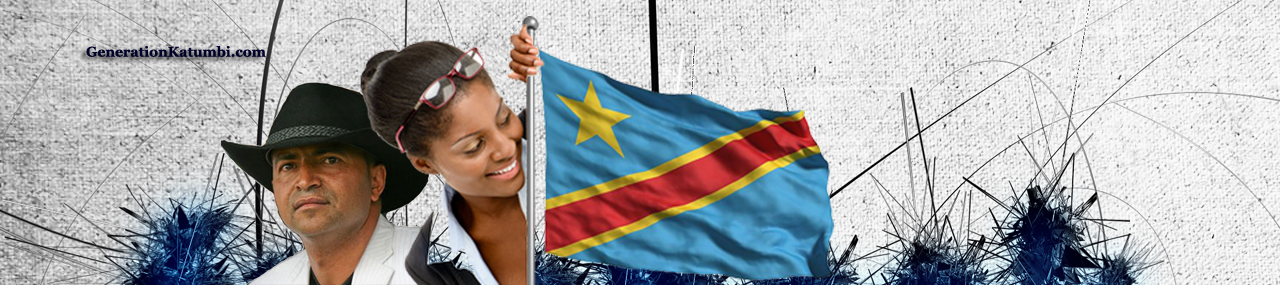
<style>
.page{position:relative;width:1280px;height:285px}
.page>*{position:absolute;margin:0}
.t1{font:14px "Georgia-Bold";color:#000229}
</style>
<div class="page">
<p class="t1" style="left:86px;top:46px;width:180px;height:11px">GenerationKatumbi.com</p>
</div>
